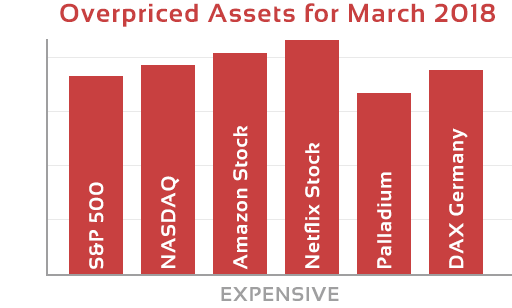
<style>
.page{position:relative;width:512px;height:308px;background:#ffffff}
.page>*{position:absolute;margin:0}
.t1{font:26px "Sansation-Bold";letter-spacing:0.05em;color:#c84040}
.t2{font:20px "Sansation-Bold";letter-spacing:0.05em;color:#ffffff}
.t3{font:20px "Sansation-Bold";letter-spacing:0.05em;color:#9f9fa0}
</style>
<div class="page">
<p class="t1" style="left:60px;top:3px;width:435px;height:24px">Overpriced Assets for March 2018</p>
<p class="t2" style="left:233px;top:125px;width:15px;height:145px;rotate:-90deg">Amazon Stock</p>
<p class="t2" style="left:449px;top:128px;width:19px;height:140px;rotate:-90deg">DAX Germany</p>
<p class="t2" style="left:304px;top:142px;width:16px;height:126px;rotate:-90deg">Netflix Stock</p>
<p class="t2" style="left:377px;top:172px;width:15px;height:96px;rotate:-90deg">Palladium</p>
<p class="t2" style="left:89px;top:182px;width:15px;height:87px;rotate:-90deg">S&amp;P 500</p>
<p class="t2" style="left:161px;top:176px;width:19px;height:92px;rotate:-90deg">NASDAQ</p>
<p class="t3" style="left:221px;top:287px;width:118px;height:14px">EXPENSIVE</p>
</div>
